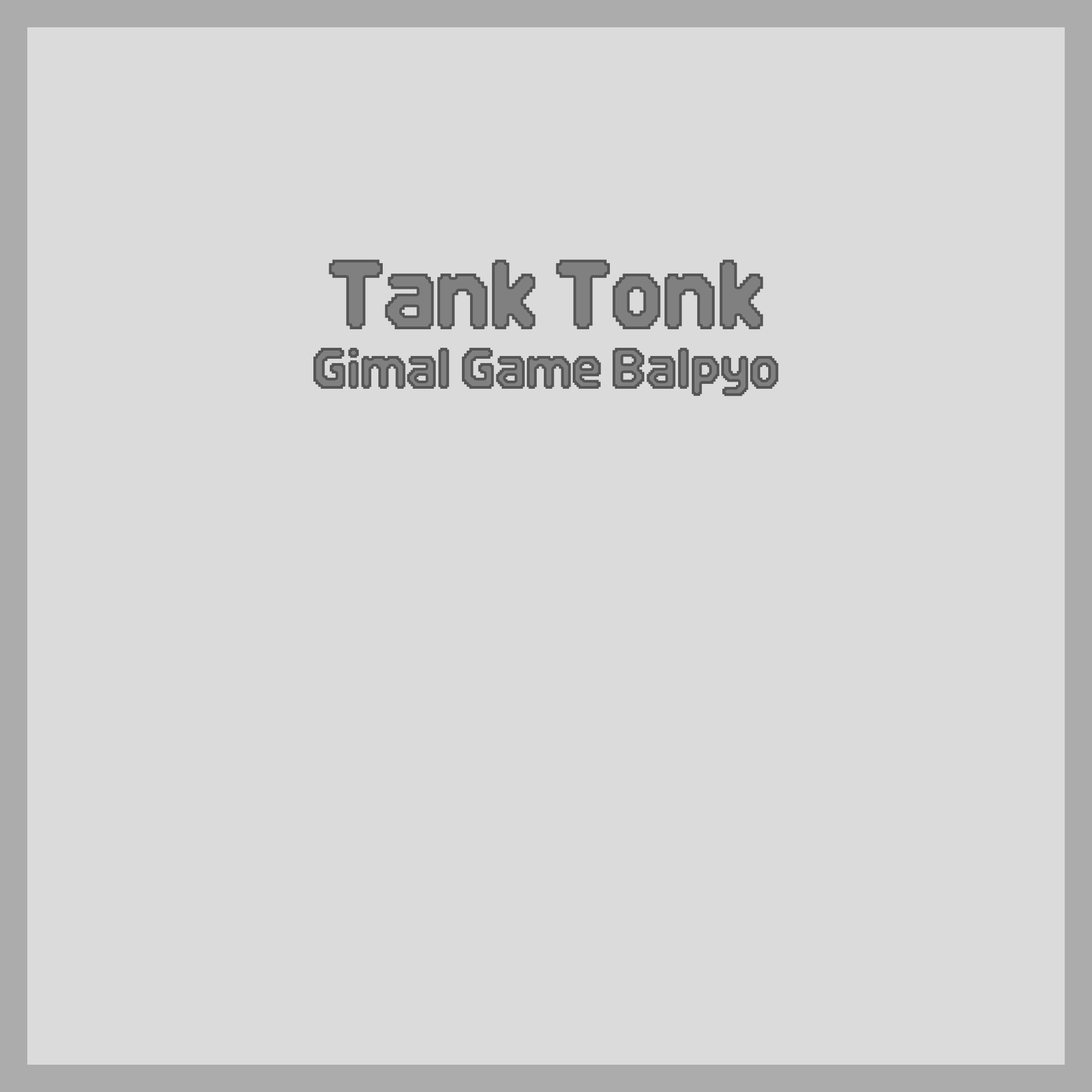
<style>
.page{position:relative;width:1092px;height:1092px;background:#dbdbdb}
.page>*{position:absolute;margin:0}
.t1{font:92.8px "DNFBitBitOTF";letter-spacing:-0.02em;color:#808080}
.t2{font:54.6px "DNFBitBitOTF";letter-spacing:-0.02em}
</style>
<div class="page">
<p class="t1" style="left:329px;top:259px;width:434px;height:70px">Tank Tonk</p>
<p class="t2" style="left:313px;top:348px;width:466px;height:48px">Gimal Game Balpyo</p>
</div>
